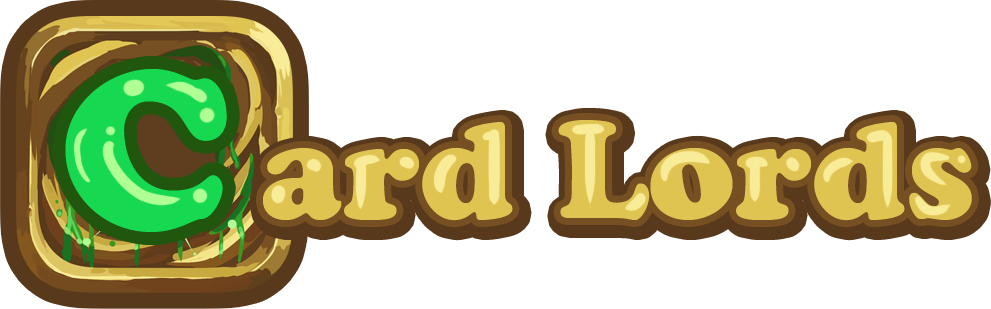
<style>
.page{position:relative;width:991px;height:309px;background:#ffffff}
.page>*{position:absolute;margin:0}
.t1{font:224.4px "CooperBlackStd";color:#16d851}
.t2{font:137.3px "CooperBlackStd";color:#dfc451}
</style>
<div class="page">
<p class="t1" style="left:65px;top:69px;width:162px;height:163px">C</p>
<p class="t2" style="left:263px;top:120px;width:709px;height:101px">ard Lords</p>
</div>
